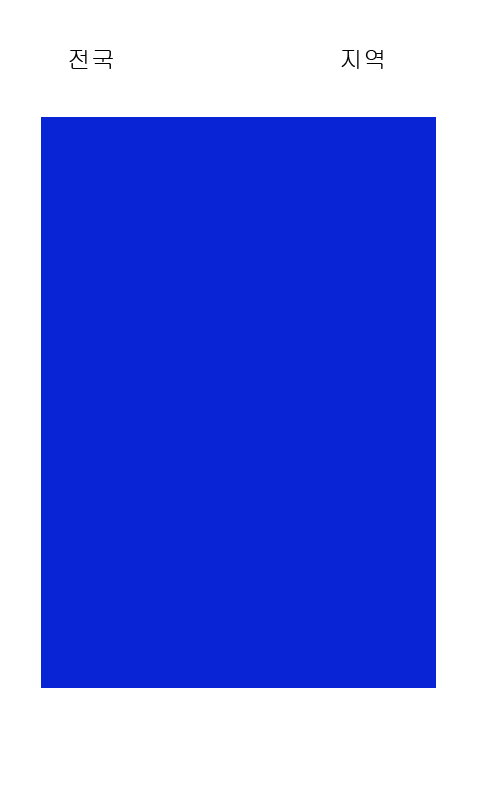
<style>
.page{position:relative;width:480px;height:800px;background:#0824d4}
.page>*{position:absolute;margin:0}
.t1{font:24px "Gulim";color:#000000}
</style>
<div class="page">
<p class="t1" style="left:67px;top:47px;width:372px;height:70px">전국                            지역</p>
</div>
